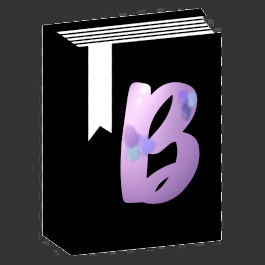
<style>
.page{position:relative;width:265px;height:265px;background:#000000}
.page>*{position:absolute;margin:0}
.t1{font:182.9px "RosalineRegular";scale:1.2 1}
</style>
<div class="page">
<p class="t1" style="left:120px;top:82px;width:80px;height:122px;rotate:-6deg">B</p>
</div>
